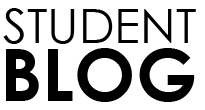
<style>
.page{position:relative;width:205px;height:110px;background:#ffffff}
.page>*{position:absolute;margin:0}
.t1{font:48px "CenturyGothic";color:#000000}
.t2{font:73px "CenturyGothic-Bold";color:#000000}
</style>
<div class="page">
<p class="t1" style="left:3px;top:8px;width:193px;height:36px">STUDENT</p>
<p class="t2" style="left:6px;top:48px;width:189px;height:54px">BLOG</p>
</div>
